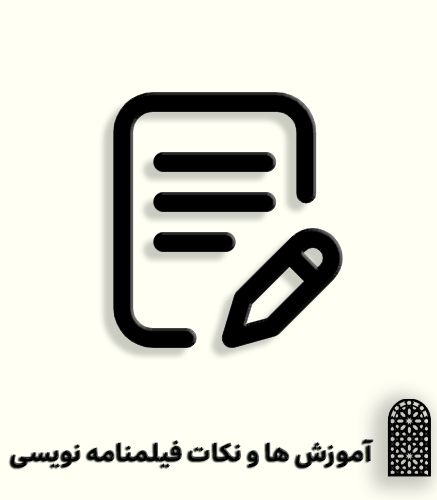
<style>
.page{position:relative;width:437px;height:500px;background:#fffff4}
.page>*{position:absolute;margin:0}
.t1{font:24px "Irancell-Bold";color:#000000}
</style>
<div class="page">
<p class="t1" style="left:11px;top:439px;width:363px;height:29px">آموزش ها و نکات فیلمنامه نویسی</p>
</div>
